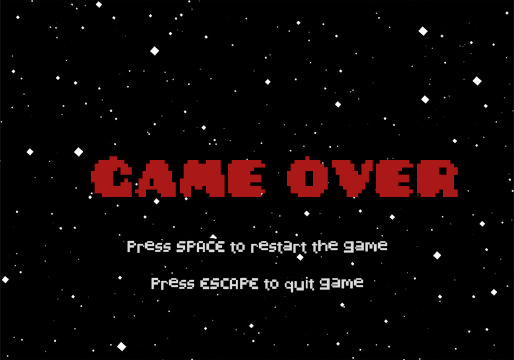
<style>
.page{position:relative;width:514px;height:360px;background:#000000}
.page>*{position:absolute;margin:0}
.t1{font:59.3px "PixelatedPusab";color:#aa1818}
.t2{font:15.5px "PixelatedDisplayRegular";color:#dcdcdc}
</style>
<div class="page">
<p class="t1" style="left:91px;top:156px;width:367px;height:41px">GAME OVER</p>
<p class="t2" style="left:127px;top:240px;width:261px;height:53px;text-align:center">Press SPACE to restart the game<br><br>Press ESCAPE to quit game</p>
</div>
